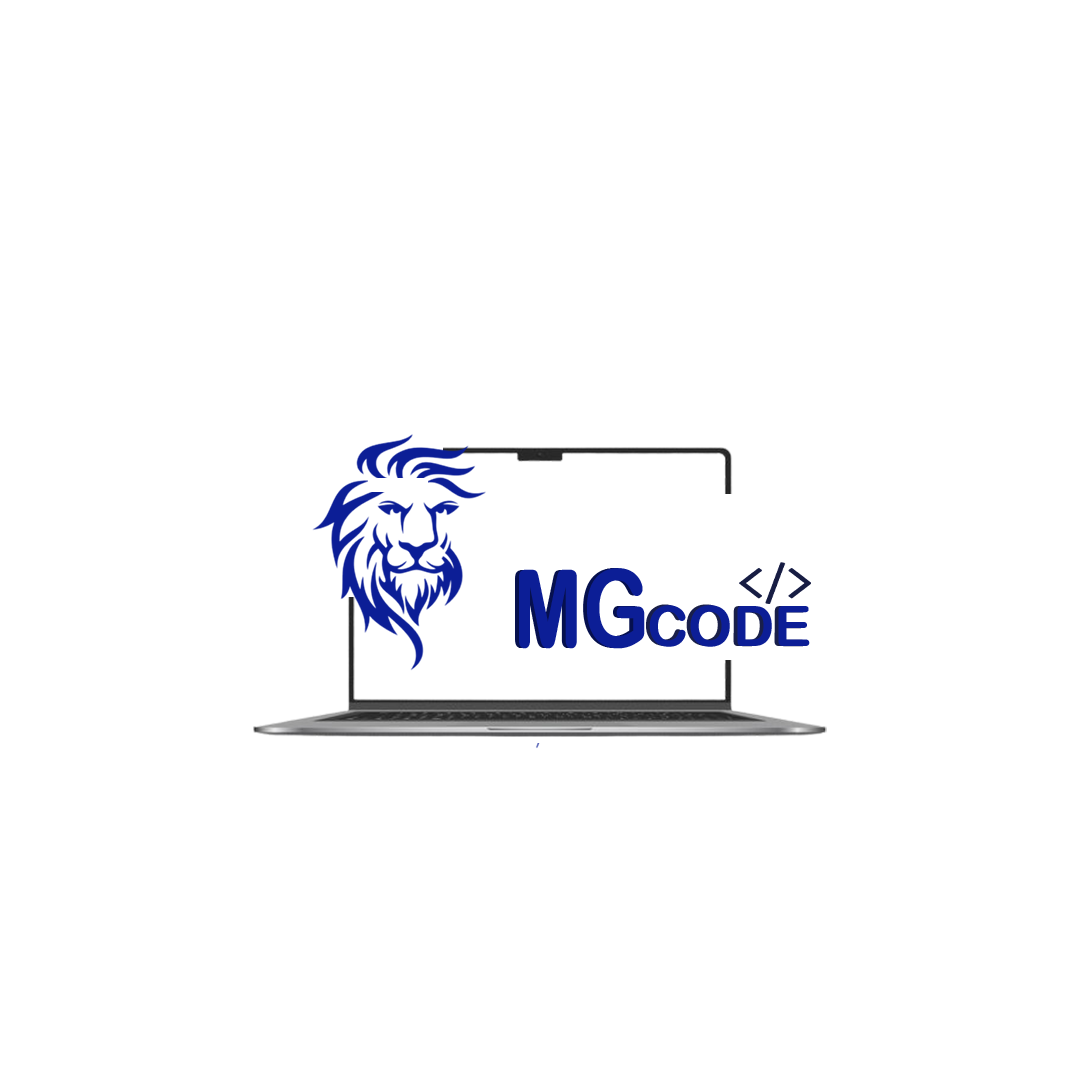
<style>
.page{position:relative;width:1080px;height:1080px;background:#ffffff}
.page>*{position:absolute;margin:0}
.t1{font:107.9px "ArialRoundedMTBold";color:#0c1e96;scale:0.78 1}
.t2{font:56px "ArialRoundedMTBold"}
.t3{font:56px "ArialRoundedMTBold";color:#0c1e96}
</style>
<div class="page">
<p class="t1" style="left:515px;top:568px;width:126px;height:80px">MG</p>
<p class="t1" style="left:519px;top:568px;width:126px;height:81px">MG</p>
<p class="t2" style="left:646px;top:604px;width:160px;height:43px;rotate:1deg">CODE</p>
<p class="t3" style="left:649px;top:605px;width:161px;height:42px">CODE</p>
</div>
